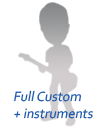
<style>
.page{position:relative;width:106px;height:128px;background:#ffffff}
.page>*{position:absolute;margin:0}
.t1{font:14px/17px "Corbel";color:#1956aa;font-style:italic}
</style>
<div class="page">
<p class="t1" style="left:14px;top:90px;width:79px;height:29px">Full Custom<br>+ instruments</p>
</div>
